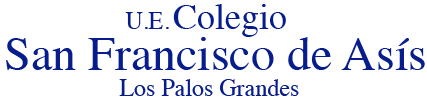
<style>
.page{position:relative;width:427px;height:98px;background:#ffffff}
.page>*{position:absolute;margin:0}
.t1{font:36px "Times-Roman";color:#071d8e}
.t2{font:24px "Times-Roman";color:#071d8e}
.t3{font:48px "Times-Roman";color:#071d8e}
</style>
<div class="page">
<p class="t1" style="left:173px;top:4px;width:113px;height:33px">Colegio</p>
<p class="t2" style="left:125px;top:12px;width:44px;height:17px">U.E.</p>
<p class="t3" style="left:6px;top:37px;width:419px;height:33px">San Francisco de Asís</p>
<p class="t2" style="left:119px;top:79px;width:180px;height:17px">Los Palos Grandes</p>
</div>
